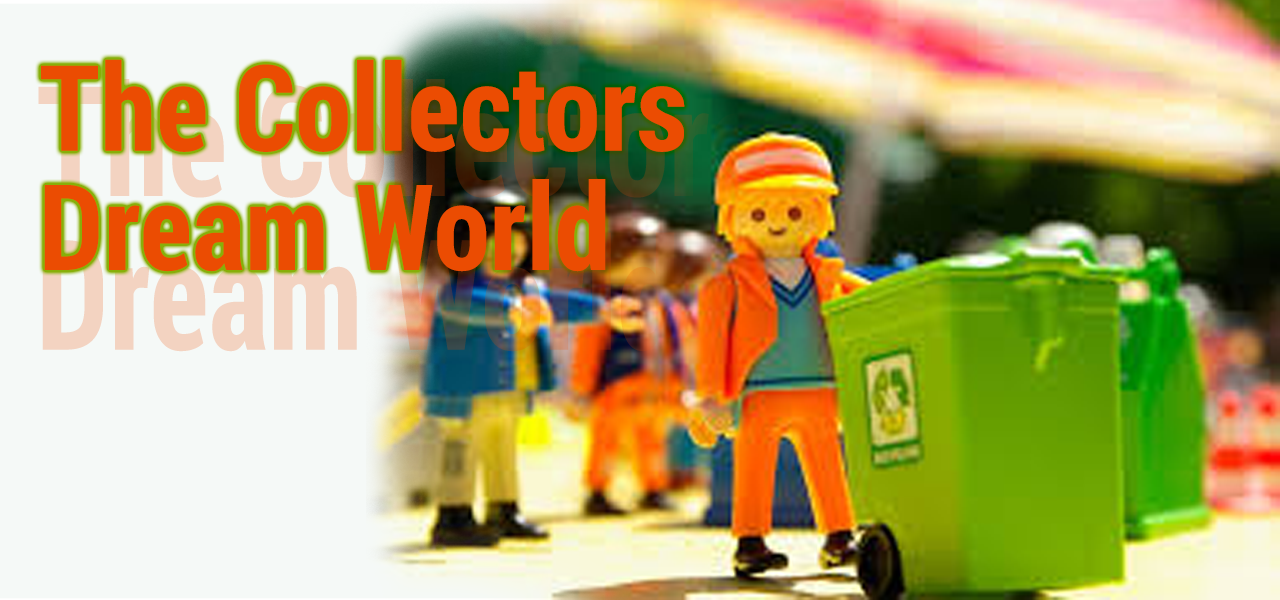
<style>
.page{position:relative;width:1280px;height:600px;background:#f5f9f7}
.page>*{position:absolute;margin:0}
.t1{font:119.2px/39.7px "RobotoCondensed-Bold";color:#eb4c02}
</style>
<div class="page">
<p class="t1" style="left:41px;top:59px;width:644px;height:213px">The Collectors<br><br><br>Dream World</p>
</div>
